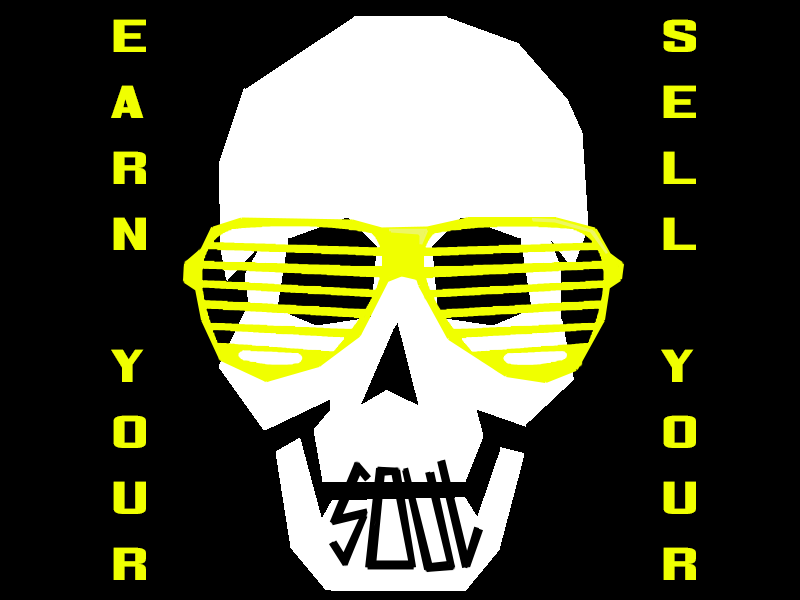
<style>
.page{position:relative;width:800px;height:600px;background:#000000}
.page>*{position:absolute;margin:0}
.t1{font:55px "CorporateHQ";color:#f0ff00}
</style>
<div class="page">
<p class="t1" style="left:111px;top:19px;width:35px;height:561px">E<br>A<br>R<br>N<br><br>Y<br>O<br>U<br>R</p>
<p class="t1" style="left:661px;top:19px;width:35px;height:561px">S<br>E<br>L<br>L<br><br>Y<br>O<br>U<br>R</p>
</div>
